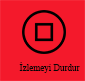
<style>
.page{position:relative;width:85px;height:81px;background:#f4192b}
.page>*{position:absolute;margin:0}
.t1{font:9px "TimesNewRomanPSMT";color:#060606}
</style>
<div class="page">
<p class="t1" style="left:19px;top:62px;width:61px;height:11px">İzlemeyi Durdur</p>
</div>
